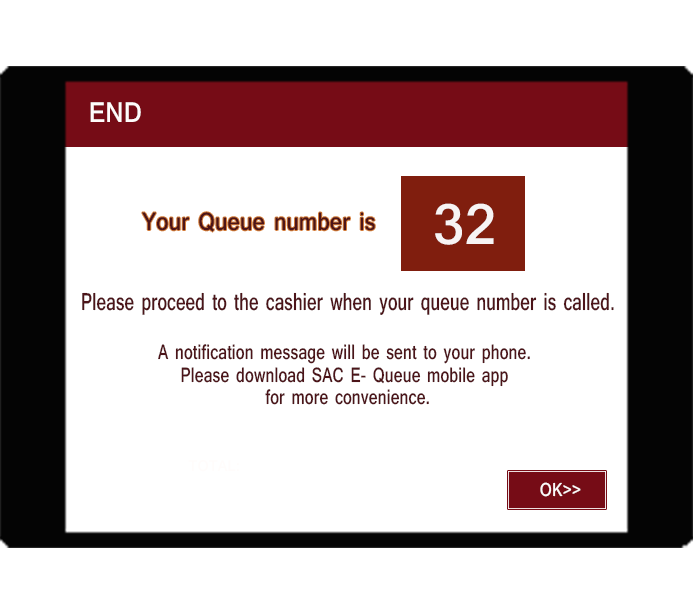
<style>
.page{position:relative;width:693px;height:612px;background:#ffffff}
.page>*{position:absolute;margin:0}
.t1{font:29.9px "Shruti-Bold";letter-spacing:0.01em;color:#fffcfb;scale:0.89 1}
.t2{font:60.1px "Shruti-Bold";letter-spacing:0.01em;color:#f7f4f4}
.t3{font:26.3px "Shruti-Bold";letter-spacing:0.01em;color:#4c1419;scale:0.87 1}
.t4{font:25.6px "Shruti-Bold";letter-spacing:0.01em;color:#4c1419;scale:0.7 1}
.t5{font:21.9px/22.6px "Shruti-Bold";letter-spacing:0.01em;color:#4c1419;scale:0.75 1}
.t6{font:19.8px "Shruti-Bold";letter-spacing:0.01em;color:#fcf9f9;scale:0.85 1}
</style>
<div class="page">
<p class="t1" style="left:90px;top:102px;width:51px;height:20px">END</p>
<p class="t2" style="left:435px;top:203px;width:59px;height:42px">32</p>
<p class="t3" style="left:142px;top:212px;width:233px;height:20px">Your Queue number is</p>
<p class="t4" style="left:82px;top:292px;width:532px;height:23px">Please proceed to the cashier when your queue number is called.</p>
<p class="t5" style="left:158px;top:344px;width:372px;height:61px;text-align:center">A notification message will be sent to your phone.<br>Please download SAC E- Queue mobile app<br> for more convenience.</p>
<p class="t6" style="left:540px;top:482px;width:41px;height:15px">OK&gt;&gt;</p>
</div>
